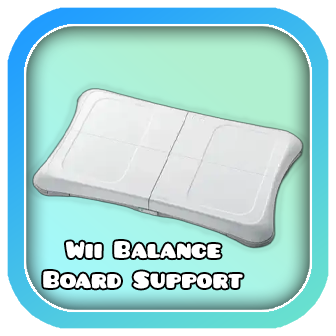
<style>
.page{position:relative;width:336px;height:336px}
.page>*{position:absolute;margin:0}
.t1{font:25px "Pusab";color:#ffffff}
</style>
<div class="page">
<p class="t1" style="left:43px;top:241px;width:200px;height:48px;text-align:center">Wii Balance Board Support</p>
</div>
